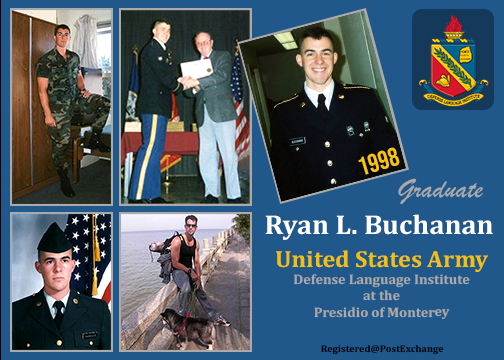
<style>
.page{position:relative;width:504px;height:360px;background:#20588b}
.page>*{position:absolute;margin:0}
.t1{font:25.8px "BebasNeue-Regular";color:#f9c50b}
.t2{font:27.4px "BrushScriptMT";color:#aaaaaa;scale:1.03 1}
.t3{font:27.4px "Cambria-Bold";color:#ffffff;scale:1.03 1}
.t4{font:13.7px "Cambria-Bold";color:#aaaaaa;scale:1.03 1}
.t5{font:23.5px "Cambria-Bold";color:#f3c10b;scale:1.03 1}
.t6{font:9.8px "Cambria-Bold";color:#000000;scale:1.03 1}
</style>
<div class="page">
<p class="t1" style="left:358px;top:147px;width:42px;height:28px;rotate:-16deg">1998</p>
<p class="t2" style="left:398px;top:178px;width:85px;height:27px">Graduate</p>
<p class="t3" style="left:265px;top:214px;width:228px;height:26px">Ryan L. Buchanan</p>
<p class="t4" style="left:276px;top:250px;width:212px;height:69px;text-align:center"><span class="t5">United States Army<br></span>Defense Language Institute<br>at the<br>Presidio of Monterey</p>
<p class="t6" style="left:321px;top:345px;width:123px;height:10px">Registered@PostExchange</p>
</div>
